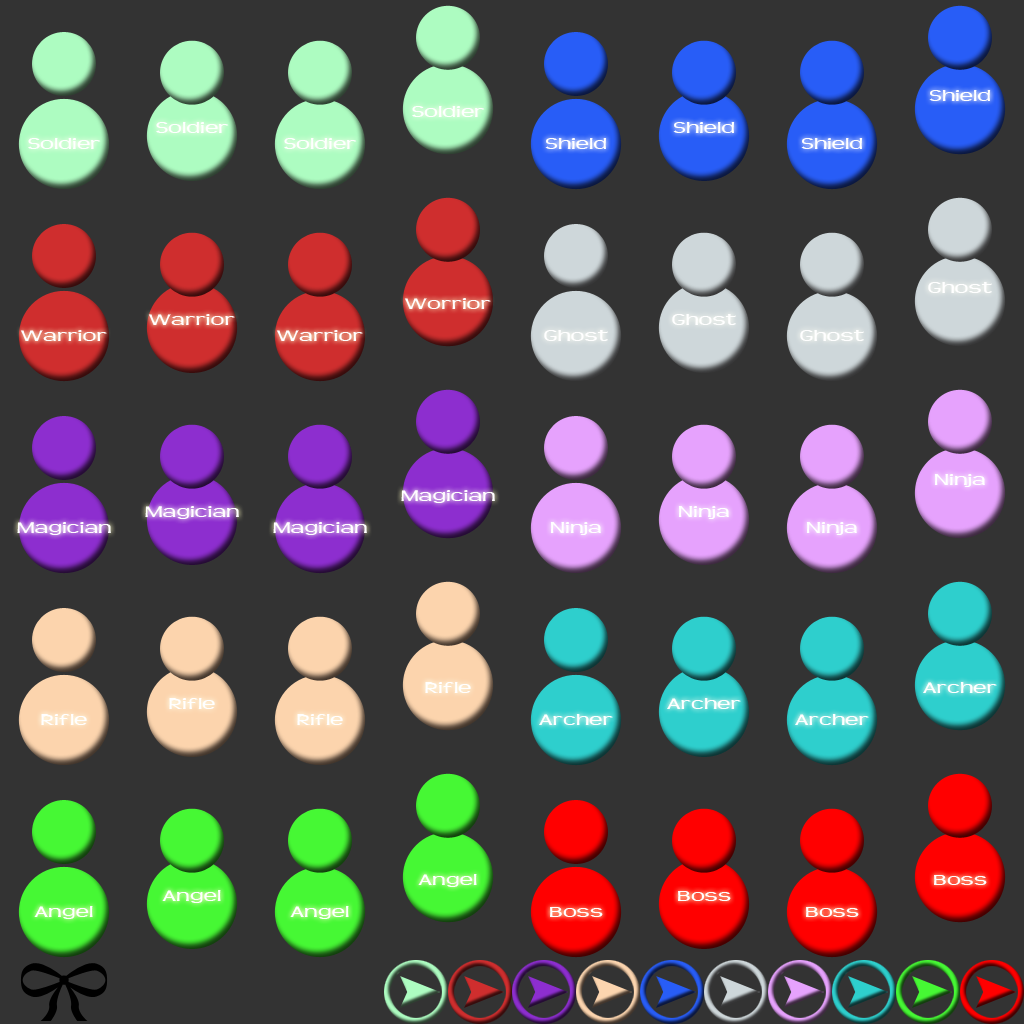
<style>
.page{position:relative;width:1024px;height:1024px;background:#333333}
.page>*{position:absolute;margin:0}
.t1{font:16.8px "Teen";color:#ffffff;scale:1.43 1}
</style>
<div class="page">
<p class="t1" style="left:929px;top:90px;width:62px;height:11px">Shield</p>
<p class="t1" style="left:412px;top:106px;width:73px;height:11px">Soldier</p>
<p class="t1" style="left:156px;top:122px;width:73px;height:11px">Soldier</p>
<p class="t1" style="left:673px;top:122px;width:62px;height:11px">Shield</p>
<p class="t1" style="left:28px;top:138px;width:73px;height:11px">Soldier</p>
<p class="t1" style="left:284px;top:138px;width:73px;height:11px">Soldier</p>
<p class="t1" style="left:545px;top:138px;width:62px;height:11px">Shield</p>
<p class="t1" style="left:801px;top:138px;width:62px;height:11px">Shield</p>
<p class="t1" style="left:928px;top:282px;width:64px;height:11px">Ghost</p>
<p class="t1" style="left:404px;top:298px;width:87px;height:11px">Worrior</p>
<p class="t1" style="left:148px;top:314px;width:87px;height:11px">Warrior</p>
<p class="t1" style="left:672px;top:314px;width:64px;height:11px">Ghost</p>
<p class="t1" style="left:20px;top:330px;width:87px;height:11px">Warrior</p>
<p class="t1" style="left:276px;top:330px;width:87px;height:11px">Warrior</p>
<p class="t1" style="left:544px;top:330px;width:64px;height:11px">Ghost</p>
<p class="t1" style="left:800px;top:330px;width:64px;height:11px">Ghost</p>
<p class="t1" style="left:934px;top:474px;width:51px;height:13px">Ninja</p>
<p class="t1" style="left:401px;top:490px;width:94px;height:13px">Magician</p>
<p class="t1" style="left:145px;top:506px;width:94px;height:13px">Magician</p>
<p class="t1" style="left:678px;top:506px;width:51px;height:13px">Ninja</p>
<p class="t1" style="left:17px;top:522px;width:94px;height:13px">Magician</p>
<p class="t1" style="left:273px;top:522px;width:94px;height:13px">Magician</p>
<p class="t1" style="left:550px;top:522px;width:51px;height:13px">Ninja</p>
<p class="t1" style="left:806px;top:522px;width:51px;height:13px">Ninja</p>
<p class="t1" style="left:425px;top:682px;width:46px;height:11px">Rifle</p>
<p class="t1" style="left:923px;top:682px;width:74px;height:11px">Archer</p>
<p class="t1" style="left:169px;top:698px;width:46px;height:11px">Rifle</p>
<p class="t1" style="left:667px;top:698px;width:74px;height:11px">Archer</p>
<p class="t1" style="left:41px;top:714px;width:46px;height:11px">Rifle</p>
<p class="t1" style="left:297px;top:714px;width:46px;height:11px">Rifle</p>
<p class="t1" style="left:539px;top:714px;width:74px;height:11px">Archer</p>
<p class="t1" style="left:795px;top:714px;width:74px;height:11px">Archer</p>
<p class="t1" style="left:418px;top:874px;width:59px;height:13px">Angel</p>
<p class="t1" style="left:934px;top:875px;width:53px;height:10px">Boss</p>
<p class="t1" style="left:162px;top:890px;width:59px;height:13px">Angel</p>
<p class="t1" style="left:678px;top:891px;width:53px;height:10px">Boss</p>
<p class="t1" style="left:34px;top:906px;width:59px;height:13px">Angel</p>
<p class="t1" style="left:290px;top:906px;width:59px;height:13px">Angel</p>
<p class="t1" style="left:550px;top:907px;width:53px;height:10px">Boss</p>
<p class="t1" style="left:806px;top:907px;width:53px;height:10px">Boss</p>
</div>
